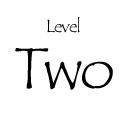
<style>
.page{position:relative;width:128px;height:128px;background:#ffffff}
.page>*{position:absolute;margin:0}
.t1{font:18px "TempusSansITC";letter-spacing:-0.04em;color:#000000}
.t2{font:60.1px "TempusSansITC";letter-spacing:-0.04em;color:#000000}
</style>
<div class="page">
<p class="t1" style="left:47px;top:17px;width:33px;height:16px">Level</p>
<p class="t2" style="left:15px;top:48px;width:98px;height:42px">Two</p>
</div>
